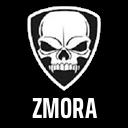
<style>
.page{position:relative;width:128px;height:128px;background:#000000}
.page>*{position:absolute;margin:0}
.t1{font:29px "SairaExtraCondensed-Bold";color:#ffffff}
</style>
<div class="page">
<p class="t1" style="left:32px;top:97px;width:65px;height:22px">ZMORA</p>
</div>
